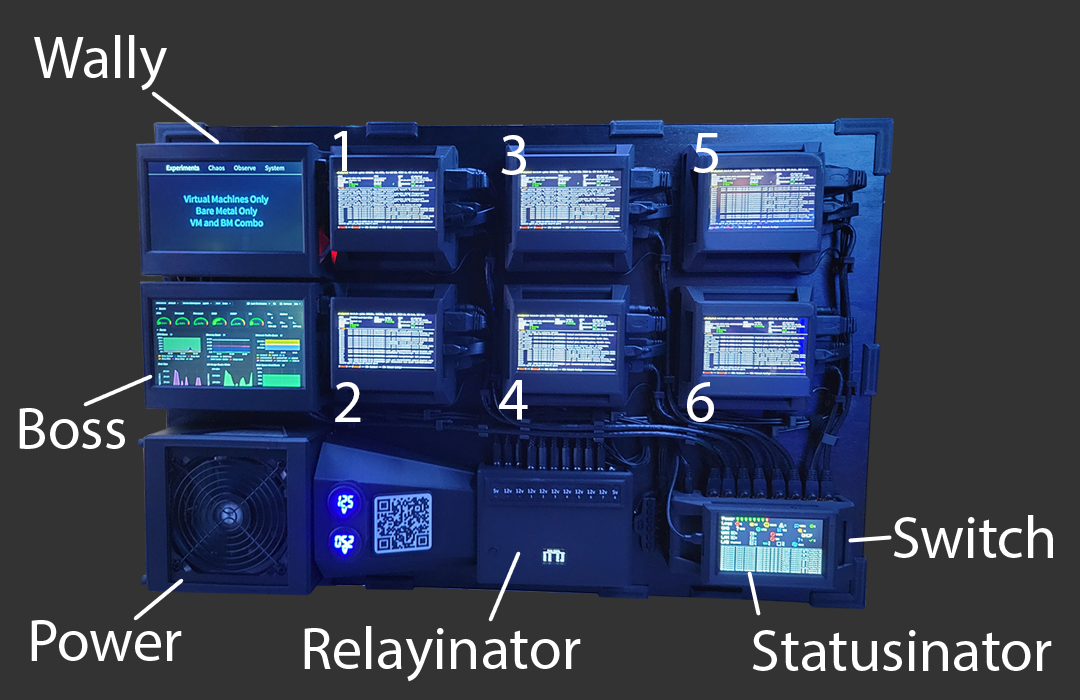
<style>
.page{position:relative;width:1080px;height:700px;background:#333333}
.page>*{position:absolute;margin:0}
.t1{font:60px "MyriadHebrew-Regular";color:#ffffff}
</style>
<div class="page">
<p class="t1" style="left:34px;top:35px;width:133px;height:56px">Wally</p>
<p class="t1" style="left:334px;top:131px;width:13px;height:40px">1</p>
<p class="t1" style="left:501px;top:135px;width:25px;height:40px">3</p>
<p class="t1" style="left:693px;top:133px;width:25px;height:40px">5</p>
<p class="t1" style="left:335px;top:382px;width:26px;height:40px">2</p>
<p class="t1" style="left:499px;top:380px;width:29px;height:40px">4</p>
<p class="t1" style="left:687px;top:382px;width:27px;height:40px">6</p>
<p class="t1" style="left:19px;top:408px;width:106px;height:41px">Boss</p>
<p class="t1" style="left:893px;top:515px;width:160px;height:43px">Switch</p>
<p class="t1" style="left:31px;top:620px;width:151px;height:41px">Power</p>
<p class="t1" style="left:304px;top:626px;width:277px;height:56px">Relayinator</p>
<p class="t1" style="left:752px;top:630px;width:300px;height:41px">Statusinator</p>
</div>
